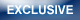
<style>
.page{position:relative;width:80px;height:20px}
.page>*{position:absolute;margin:0}
.t1{font:12px "Arial-BoldMT";letter-spacing:-0.01em;color:#ffffff;text-transform:uppercase}
</style>
<div class="page">
<p class="t1" style="left:7px;top:5px;width:66px;height:10px">Exclusive</p>
</div>
